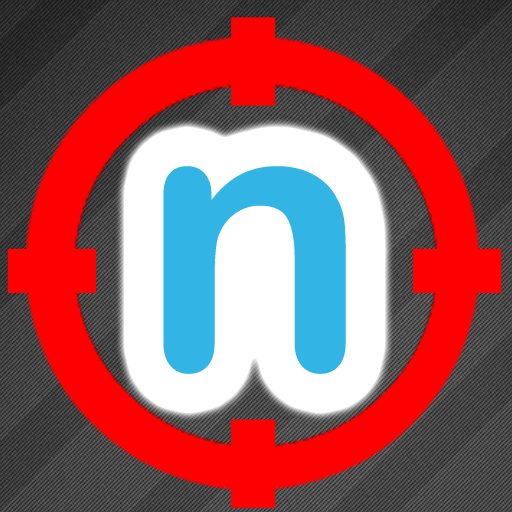
<style>
.page{position:relative;width:512px;height:512px;background:#ff0000}
.page>*{position:absolute;margin:0}
.t1{font:382.7px "ArialRoundedMTBold";color:#32b4e4}
</style>
<div class="page">
<p class="t1" style="left:163px;top:166px;width:183px;height:208px">n</p>
</div>
